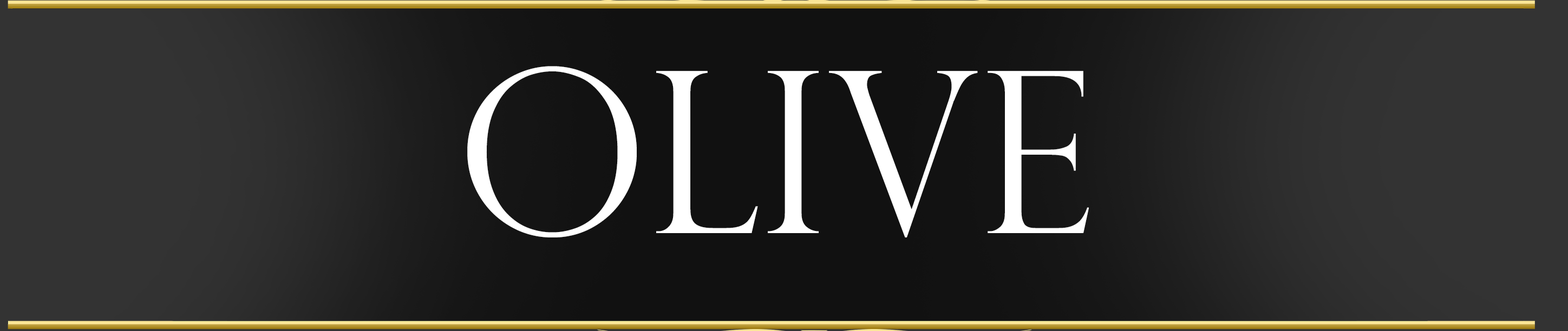
<style>
.page{position:relative;width:1568px;height:331px}
.page>*{position:absolute;margin:0}
.t1{font:225.6px "PerpetuaTitlingMT-Light";color:#ffffff}
</style>
<div class="page">
<p class="t1" style="left:467px;top:66px;width:622px;height:172px">Olive</p>
</div>
